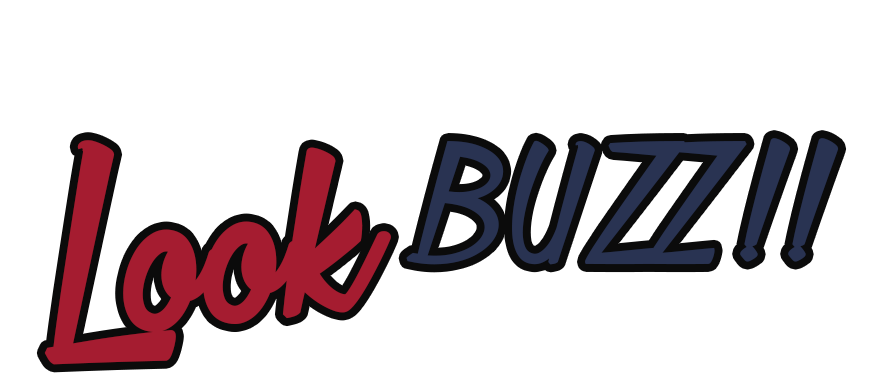
<style>
.page{position:relative;width:886px;height:390px;background:#ffffff}
.page>*{position:absolute;margin:0}
.t1{font:260px "ThunderStrike";color:#a51c30;font-weight:bold}
.t2{font:141px "ThunderStrike";color:#293352;font-weight:bold}
.t3{font:181px "ThunderStrike";color:#293352;font-weight:bold}
</style>
<div class="page">
<p class="t1" style="left:44px;top:140px;width:347px;height:225px;rotate:-6deg">Look</p>
<p class="t2" style="left:406px;top:140px;width:341px;height:125px">BUZZ</p>
<p class="t3" style="left:740px;top:138px;width:51px;height:124px">!</p>
<p class="t3" style="left:788px;top:138px;width:51px;height:124px">!</p>
</div>
